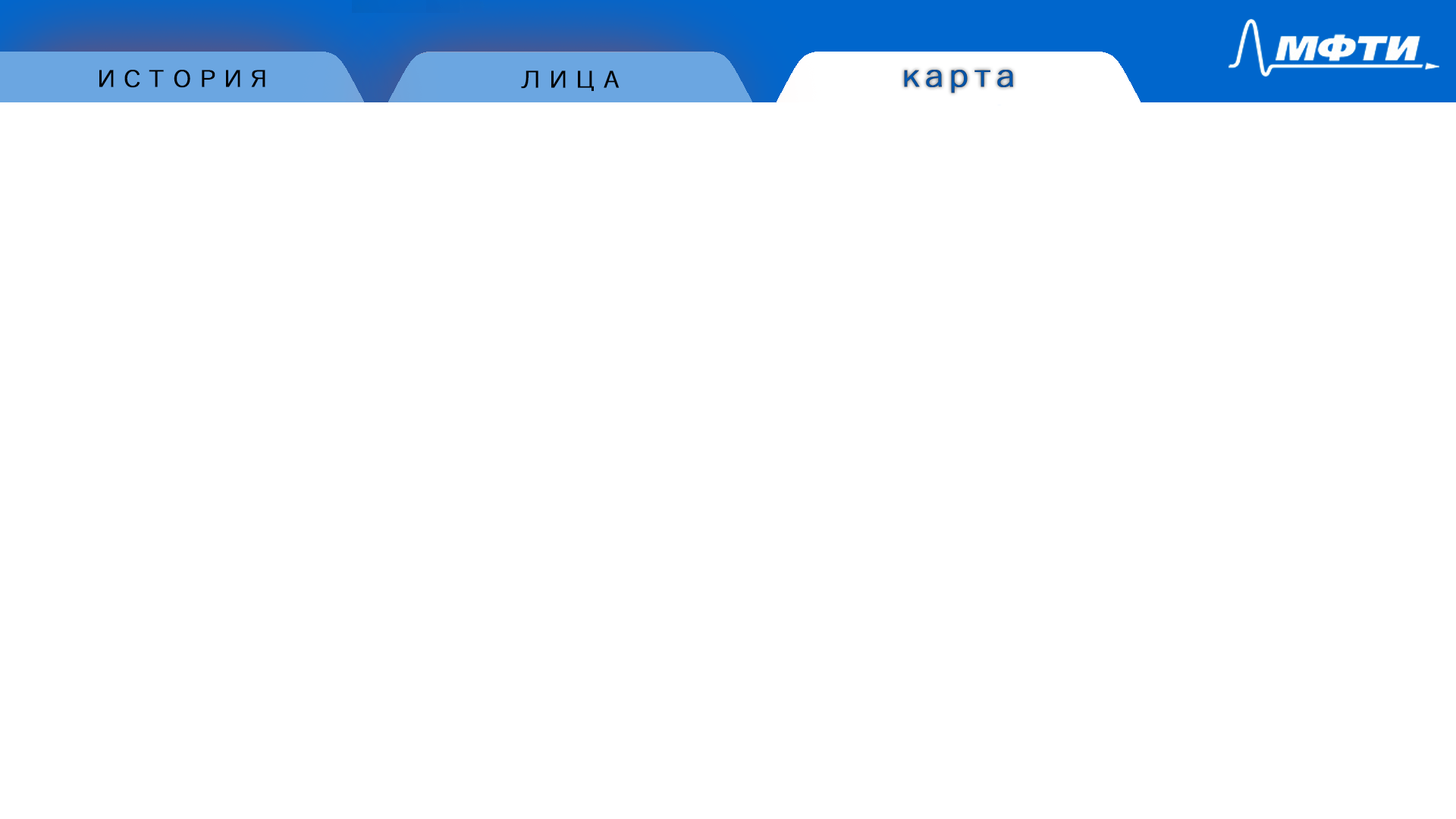
<style>
.page{position:relative;width:1456px;height:819px;background:#ffffff}
.page>*{position:absolute;margin:0}
.t1{font:32.8px "YuGothic-Regular";letter-spacing:0.2em;color:#000000;font-variant:small-caps;font-weight:bold;scale:1.11 1}
.t2{font:32.8px "YuGothic-Regular";color:#0051a2;font-weight:bold;scale:1.11 1}
</style>
<div class="page">
<p class="t1" style="left:99px;top:70px;width:166px;height:18px">история</p>
<p class="t1" style="left:521px;top:71px;width:99px;height:20px">лица</p>
<p class="t2" style="left:904px;top:70px;width:109px;height:23px">карта</p>
</div>
